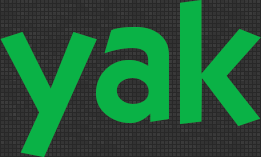
<style>
.page{position:relative;width:261px;height:157px;background:#0ab246}
.page>*{position:absolute;margin:0}
.t1{font:168px "ELEGANCE";letter-spacing:0.06em;color:#0ab246}
.t2{font:168px "ELEGANCE";color:#0ab246}
</style>
<div class="page">
<p class="t1" style="left:0px;top:0px;width:261px;height:157px"><span class="t2">y</span>ak</p>
</div>
